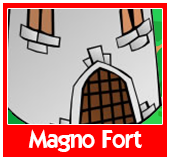
<style>
.page{position:relative;width:170px;height:160px;background:#ff0000}
.page>*{position:absolute;margin:0}
.t1{font:24px "ELEGANCE";color:#ffffff}
</style>
<div class="page">
<p class="t1" style="left:28px;top:129px;width:114px;height:23px">Magno Fort</p>
</div>
